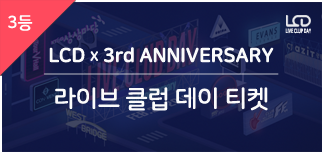
<style>
.page{position:relative;width:322px;height:152px}
.page>*{position:absolute;margin:0}
.t1{font:17px "NanumSquareRoundB";letter-spacing:-0.01em;color:#fefefe}
.t2{font:6.1px "NanumSquareRoundEB";letter-spacing:-0.01em;color:#fefefe;scale:0.59 1}
.t3{font:19.9px "NanumSquareRoundEB";letter-spacing:-0.025em;color:#fbfbfb;text-transform:uppercase}
.t4{font:19.9px "NanumSquareRoundEB";letter-spacing:-0.025em;color:#fbfbfb}
.t5{font:13.3px "NanumSquareRoundEB";letter-spacing:-0.025em;color:#fbfbfb;text-transform:uppercase}
.t6{font:24.9px "NanumSquareRoundB";letter-spacing:-0.025em;color:#fbfbfb}
</style>
<div class="page">
<p class="t1" style="left:8px;top:15px;width:25px;height:16px">3등</p>
<p class="t2" style="left:285px;top:28px;width:26px;height:6px">LIVE CLUP DAY</p>
<p class="t3" style="left:49px;top:47px;width:225px;height:16px">LCD    3<span class="t4">rd </span>anniversary</p>
<p class="t5" style="left:90px;top:51px;width:8px;height:10px">x</p>
<p class="t6" style="left:55px;top:87px;width:213px;height:24px">라이브 클럽 데이 티켓</p>
</div>
